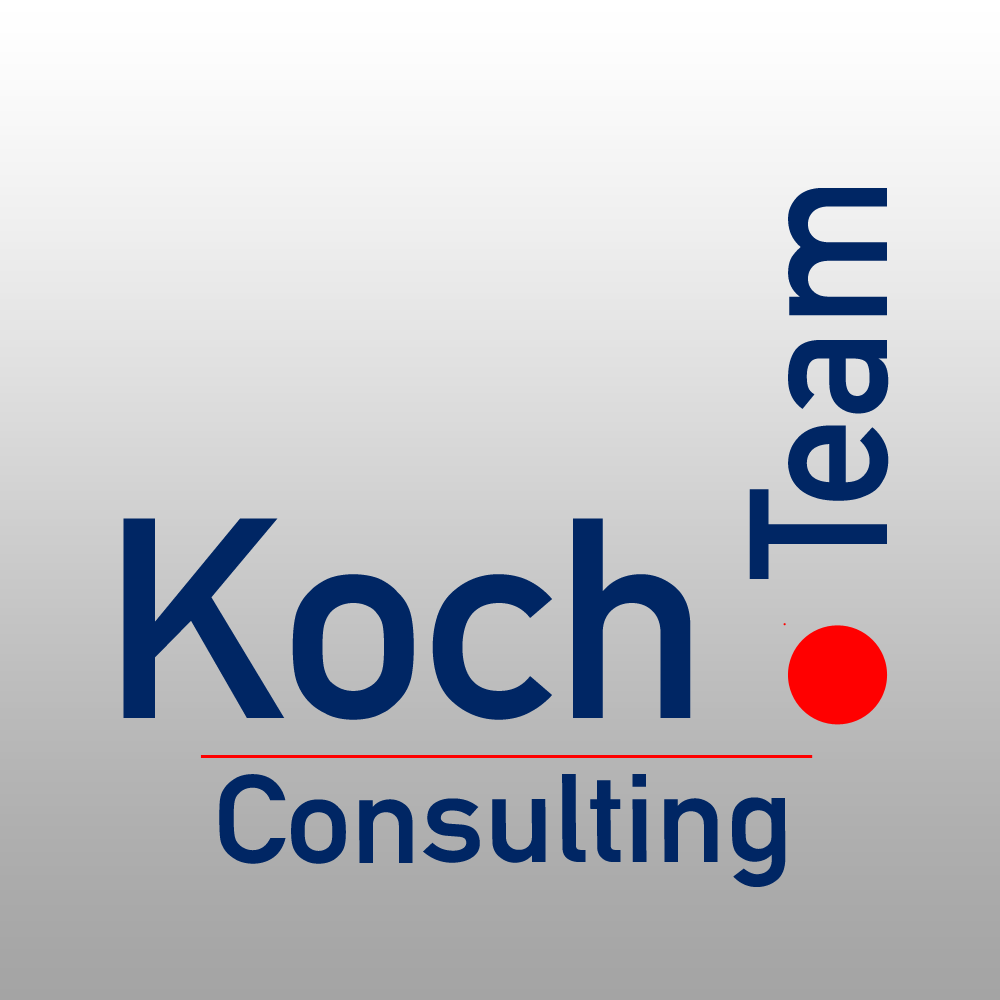
<style>
.page{position:relative;width:1000px;height:1000px}
.page>*{position:absolute;margin:0}
.t1{font:192.4px "DINAlternate-Bold";color:#002664;scale:0.93 1}
.t2{font:279.7px "DINAlternate-Bold";color:#002664;scale:1.03 1}
.t3{font:123.5px "DINAlternate-Bold";color:#002664;scale:1.06 1}
</style>
<div class="page">
<p class="t1" style="left:749px;top:188px;width:140px;height:391px;rotate:-90deg">Team</p>
<p class="t2" style="left:123px;top:518px;width:568px;height:202px">Koch</p>
<p class="t3" style="left:219px;top:774px;width:567px;height:113px">Consulting</p>
</div>
